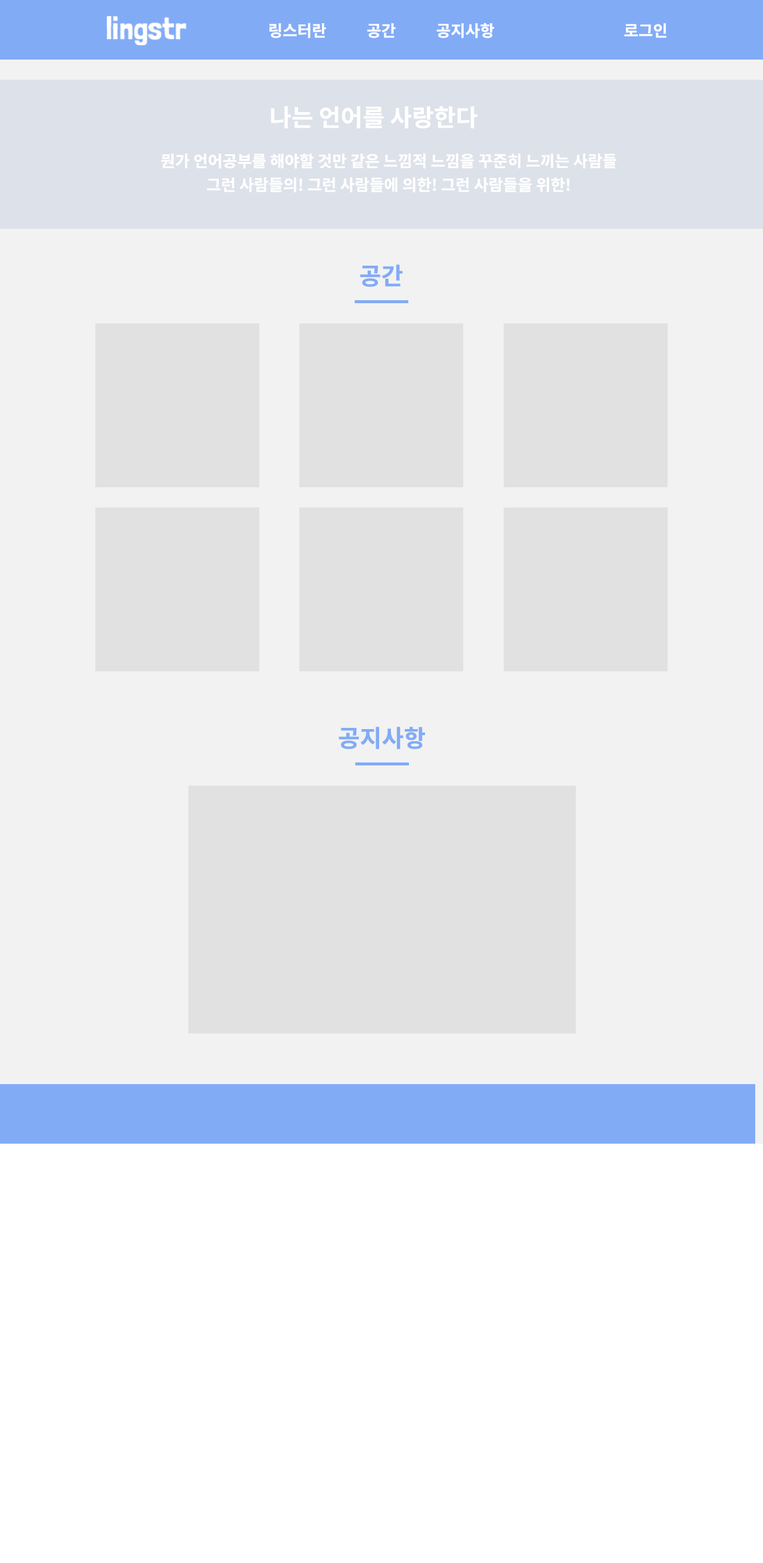
<style>
.page{position:relative;width:763px;height:1563px;background:#f2f2f2}
.page>*{position:absolute;margin:0}
.t1{font:15.9px "SpoqaHanSans-Bold";color:#ffffff}
.t2{font:23.8px "SpoqaHanSans-Bold";color:#ffffff}
.t3{font:15.9px/23.8px "SpoqaHanSans-Bold";color:#ffffff}
.t4{font:23.8px "SpoqaHanSans-Bold";color:#82abf6}
</style>
<div class="page">
<p class="t1" style="left:269px;top:23px;width:57px;height:15px">링스터란</p>
<p class="t1" style="left:367px;top:23px;width:29px;height:15px">공간</p>
<p class="t1" style="left:436px;top:23px;width:58px;height:15px">공지사항</p>
<p class="t1" style="left:624px;top:23px;width:42px;height:15px">로그인</p>
<p class="t2" style="left:271px;top:106px;width:206px;height:23px">나는 언어를 사랑한다</p>
<p class="t3" style="left:161px;top:153px;width:455px;height:39px;text-align:center">뭔가 언어공부를 해야할 것만 같은 느낌적 느낌을 꾸준히 느끼는 사람들<br>그런 사람들의! 그런 사람들에 의한! 그런 사람들을 위한!</p>
<p class="t4" style="left:360px;top:265px;width:43px;height:22px">공간</p>
<p class="t4" style="left:338px;top:727px;width:87px;height:23px">공지사항</p>
</div>
